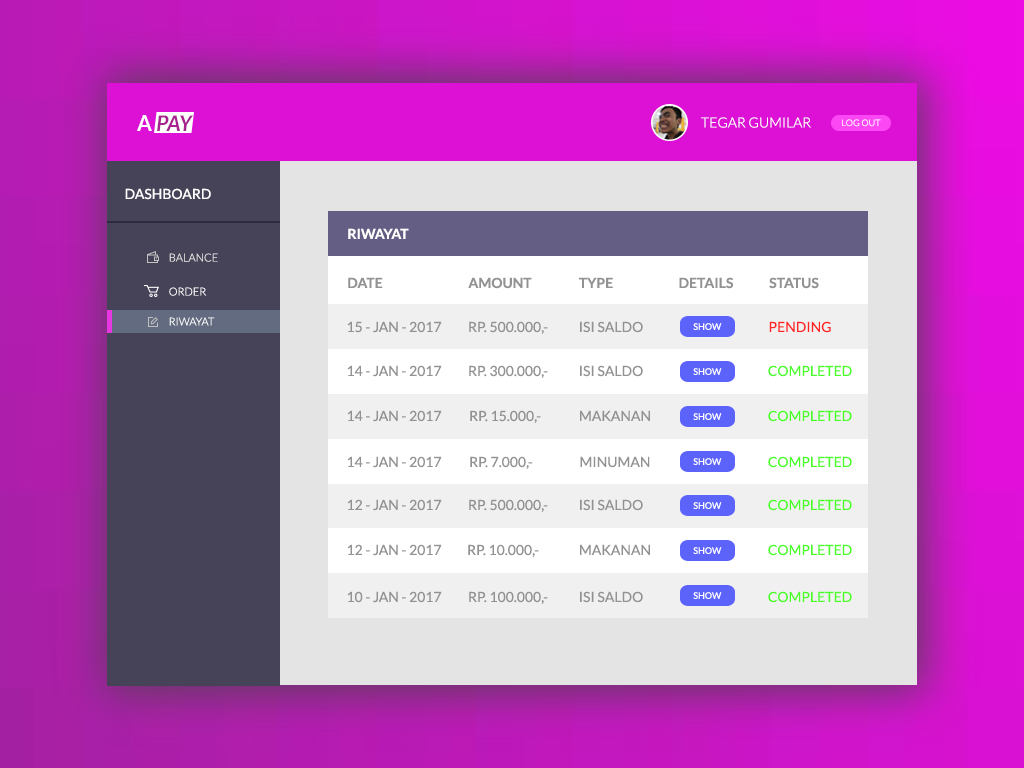
<style>
.page{position:relative;width:1024px;height:768px}
.page>*{position:absolute;margin:0}
.t1{font:21.7px "Lato-BoldItalic";color:#a7218f}
.t2{font:21.7px "Lato-Bold";color:#ffffff}
.t3{font:14px "Lato-Light";color:#ffffff;text-transform:uppercase}
.t4{font:9px "Lato-Light";text-transform:uppercase}
.t5{font:14px "Lato-Regular";color:#ffffff;text-transform:uppercase}
.t6{font:14px "Lato-Bold";color:#ffffff;text-transform:uppercase}
.t7{font:11px "Lato-Light";color:#e4e4e4;text-transform:uppercase}
.t8{font:14px "Lato-Bold";color:#929292;text-transform:uppercase}
.t9{font:11px "Lato-Light";color:#ffffff;text-transform:uppercase}
.t10{font:14px "Lato-Regular";color:#929292;text-transform:uppercase}
.t11{font:9px "Lato-Regular";color:#ffffff;text-transform:uppercase}
.t12{font:14px "Lato-Regular";color:#ff2525;text-transform:uppercase}
.t13{font:14px "Lato-Regular";color:#49ff25;text-transform:uppercase}
</style>
<div class="page">
<p class="t1" style="left:137px;top:115px;width:56px;height:16px"><span class="t2">A </span>PAY</p>
<p class="t3" style="left:701px;top:117px;width:110px;height:11px">tegar gumilar</p>
<p class="t4" style="left:842px;top:119px;width:39px;height:8px">log out</p>
<p class="t5" style="left:125px;top:188px;width:86px;height:12px">dashboard</p>
<p class="t6" style="left:348px;top:228px;width:61px;height:11px">riwayat</p>
<p class="t7" style="left:169px;top:253px;width:49px;height:9px">balance</p>
<p class="t8" style="left:348px;top:277px;width:35px;height:11px">date</p>
<p class="t8" style="left:468px;top:277px;width:64px;height:12px">amount</p>
<p class="t8" style="left:579px;top:277px;width:34px;height:11px">type</p>
<p class="t8" style="left:679px;top:277px;width:55px;height:12px">details</p>
<p class="t8" style="left:769px;top:277px;width:50px;height:12px">status</p>
<p class="t9" style="left:169px;top:287px;width:38px;height:9px">order</p>
<p class="t9" style="left:169px;top:317px;width:46px;height:9px">riwayat</p>
<p class="t10" style="left:347px;top:321px;width:95px;height:12px">15 - jan - 2017</p>
<p class="t10" style="left:469px;top:321px;width:79px;height:13px">rp. 500.000,-</p>
<p class="t10" style="left:580px;top:321px;width:63px;height:12px">isi saldo</p>
<p class="t11" style="left:693px;top:323px;width:29px;height:7px">show</p>
<p class="t12" style="left:769px;top:321px;width:62px;height:12px">pending</p>
<p class="t10" style="left:347px;top:365px;width:95px;height:12px">14 - jan - 2017</p>
<p class="t10" style="left:469px;top:365px;width:79px;height:13px">rp. 300.000,-</p>
<p class="t10" style="left:580px;top:365px;width:63px;height:12px">isi saldo</p>
<p class="t13" style="left:768px;top:365px;width:84px;height:12px">completed</p>
<p class="t11" style="left:693px;top:368px;width:29px;height:7px">show</p>
<p class="t10" style="left:347px;top:410px;width:95px;height:12px">14 - jan - 2017</p>
<p class="t10" style="left:470px;top:410px;width:71px;height:13px">rp. 15.000,-</p>
<p class="t10" style="left:580px;top:410px;width:70px;height:12px">makanan</p>
<p class="t11" style="left:693px;top:413px;width:29px;height:7px">show</p>
<p class="t13" style="left:768px;top:410px;width:84px;height:12px">completed</p>
<p class="t10" style="left:347px;top:456px;width:95px;height:12px">14 - jan - 2017</p>
<p class="t10" style="left:470px;top:456px;width:63px;height:13px">rp. 7.000,-</p>
<p class="t10" style="left:580px;top:456px;width:70px;height:12px">minuman</p>
<p class="t11" style="left:693px;top:458px;width:29px;height:7px">show</p>
<p class="t13" style="left:768px;top:456px;width:84px;height:12px">completed</p>
<p class="t10" style="left:347px;top:499px;width:95px;height:12px">12 - jan - 2017</p>
<p class="t10" style="left:469px;top:499px;width:79px;height:13px">rp. 500.000,-</p>
<p class="t10" style="left:580px;top:499px;width:63px;height:12px">isi saldo</p>
<p class="t11" style="left:693px;top:502px;width:29px;height:7px">show</p>
<p class="t13" style="left:768px;top:499px;width:84px;height:12px">completed</p>
<p class="t10" style="left:347px;top:544px;width:95px;height:12px">12 - jan - 2017</p>
<p class="t10" style="left:468px;top:544px;width:71px;height:13px">rp. 10.000,-</p>
<p class="t10" style="left:580px;top:544px;width:70px;height:12px">makanan</p>
<p class="t13" style="left:768px;top:544px;width:84px;height:12px">completed</p>
<p class="t11" style="left:693px;top:547px;width:29px;height:7px">show</p>
<p class="t10" style="left:347px;top:591px;width:95px;height:12px">10 - jan - 2017</p>
<p class="t10" style="left:469px;top:591px;width:79px;height:13px">rp. 100.000,-</p>
<p class="t10" style="left:580px;top:591px;width:63px;height:12px">isi saldo</p>
<p class="t11" style="left:693px;top:592px;width:29px;height:7px">show</p>
<p class="t13" style="left:768px;top:591px;width:84px;height:12px">completed</p>
</div>
